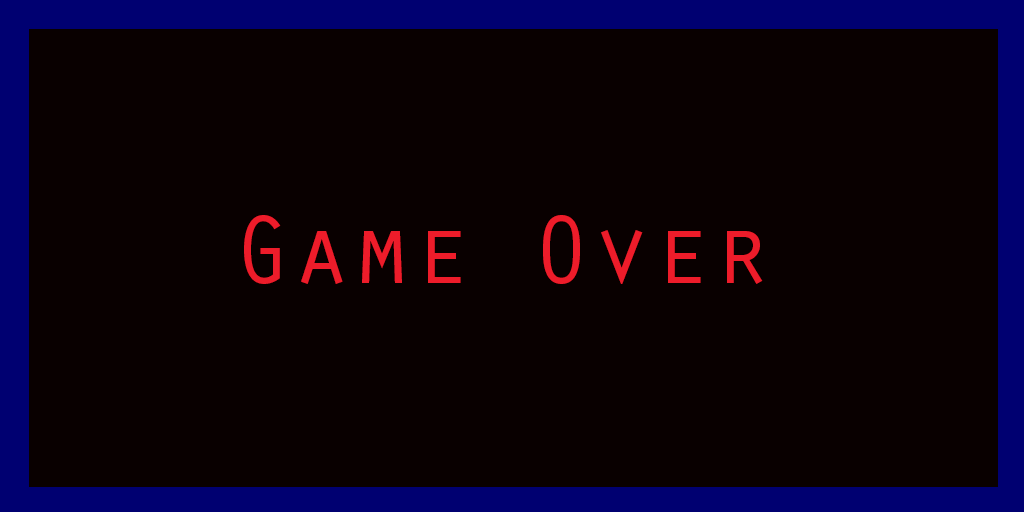
<style>
.page{position:relative;width:1024px;height:512px;background:#090000}
.page>*{position:absolute;margin:0}
.t1{font:100px "OratorStd";color:#ed1c2a}
</style>
<div class="page">
<p class="t1" style="left:244px;top:215px;width:519px;height:69px">Game Over</p>
</div>
